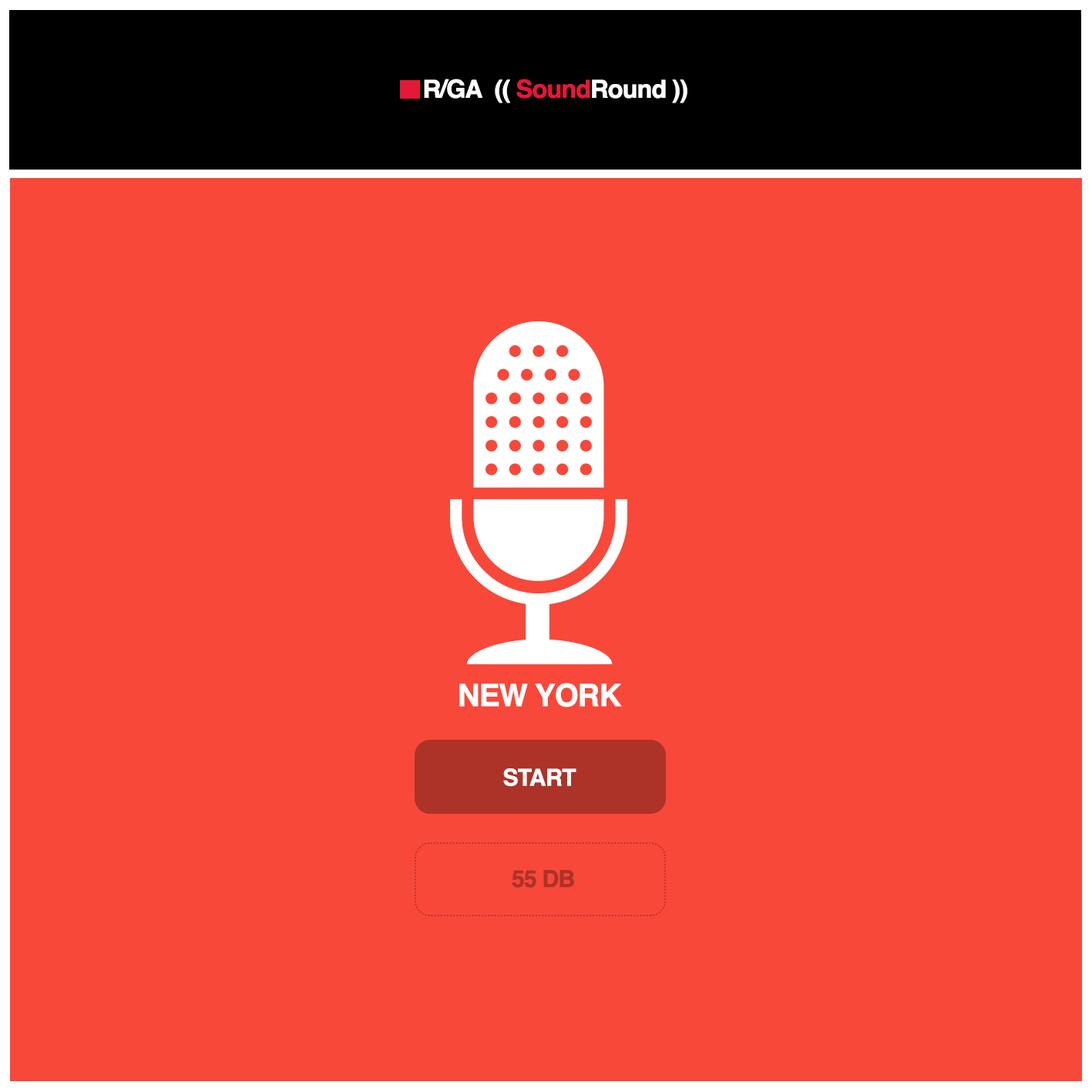
<style>
.page{position:relative;width:1092px;height:1092px;background:#f8483a}
.page>*{position:absolute;margin:0}
.t1{font:24.6px "Helvetica-Bold";letter-spacing:-0.05em;color:#ffffff;font-weight:bold}
.t2{font:24.6px "Helvetica-Bold";letter-spacing:-0.05em;color:#000000;font-weight:bold}
.t3{font:24.6px "Helvetica-Bold";letter-spacing:-0.05em;color:#e51837;font-weight:bold}
.t4{font:30.8px "Helvetica-Bold";letter-spacing:-0.05em;color:#ffffff;font-weight:bold}
.t5{font:23.1px "Helvetica-Bold";letter-spacing:-0.05em;color:#ffffff;font-weight:bold}
.t6{font:23.1px "Helvetica-Bold";letter-spacing:-0.05em;color:#ad3228;font-weight:bold}
</style>
<div class="page">
<p class="t1" style="left:424px;top:79px;width:263px;height:24px"><span class="t2"> </span>R/GA  (( <span class="t3">Sound</span>Round ))</p>
<p class="t4" style="left:459px;top:683px;width:163px;height:24px">NEW YORK</p>
<p class="t5" style="left:503px;top:768px;width:73px;height:19px">START</p>
<p class="t6" style="left:512px;top:870px;width:62px;height:18px">55 DB</p>
</div>
